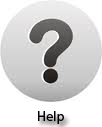
<style>
.page{position:relative;width:102px;height:127px;background:#ffffff}
.page>*{position:absolute;margin:0}
.t1{font:14px "MyriadPro-Regular";color:#000000}
</style>
<div class="page">
<p class="t1" style="left:38px;top:111px;width:26px;height:13px">Help</p>
</div>
